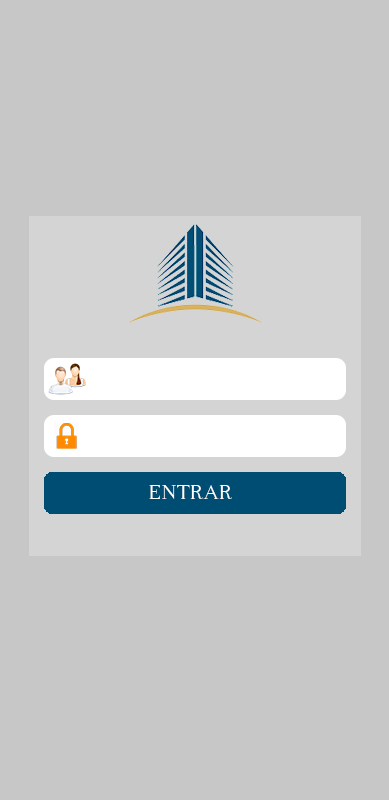
<style>
.page{position:relative;width:389px;height:800px;background:#c7c7c7}
.page>*{position:absolute;margin:0}
.t1{font:20.8px "EuroRoman";color:#ffffff}
</style>
<div class="page">
<p class="t1" style="left:149px;top:485px;width:83px;height:14px">ENTRAR</p>
</div>
